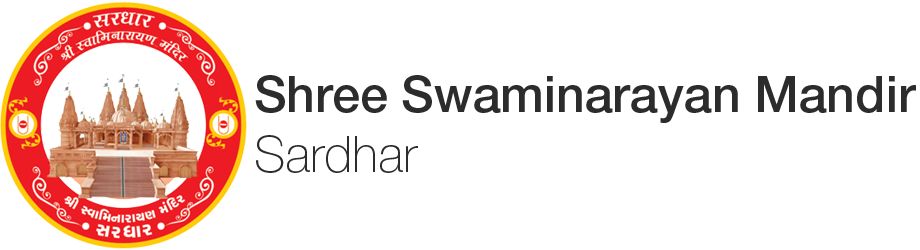
<style>
.page{position:relative;width:920px;height:250px;background:#ffffff}
.page>*{position:absolute;margin:0}
.t1{font:50px "HelveticaNeue-Medium";color:#2c2c2c}
.t2{font:50px "HelveticaNeue-Thin";color:#2c2c2c}
</style>
<div class="page">
<p class="t1" style="left:255px;top:75px;width:661px;height:98px">Shree Swaminarayan Mandir<br><span class="t2">Sardhar</span></p>
</div>
